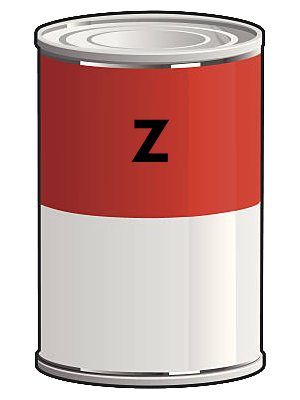
<style>
.page{position:relative;width:300px;height:400px;background:#ffffff}
.page>*{position:absolute;margin:0}
.t1{font:64px "LeagueSpartan-Bold";color:#000000}
</style>
<div class="page">
<p class="t1" style="left:131px;top:119px;width:39px;height:43px">Z</p>
</div>
